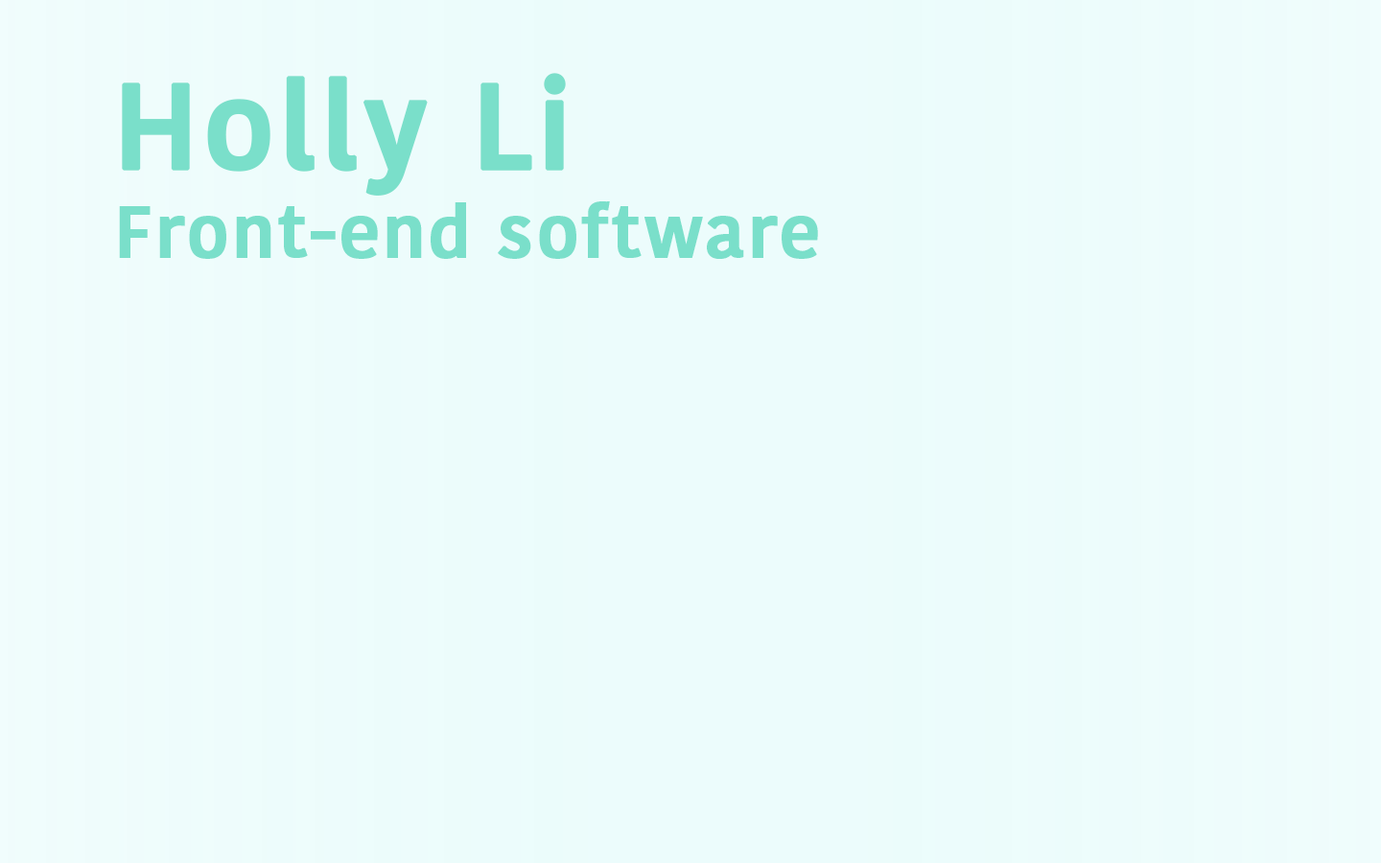
<style>
.page{position:relative;width:1381px;height:863px;background:#ecfcfc}
.page>*{position:absolute;margin:0}
.t1{font:71.9px/127.9px "KohinoorDevanagari-Medium";letter-spacing:0.02em;color:#7adfca;font-weight:bold}
.t2{font:119.9px/127.9px "KohinoorDevanagari-Medium";letter-spacing:0.02em;color:#7adfca;font-weight:bold}
</style>
<div class="page">
<p class="t1" style="left:119px;top:73px;width:699px;height:186px"><span class="t2">Holly Li<br></span>Front-end software</p>
</div>
